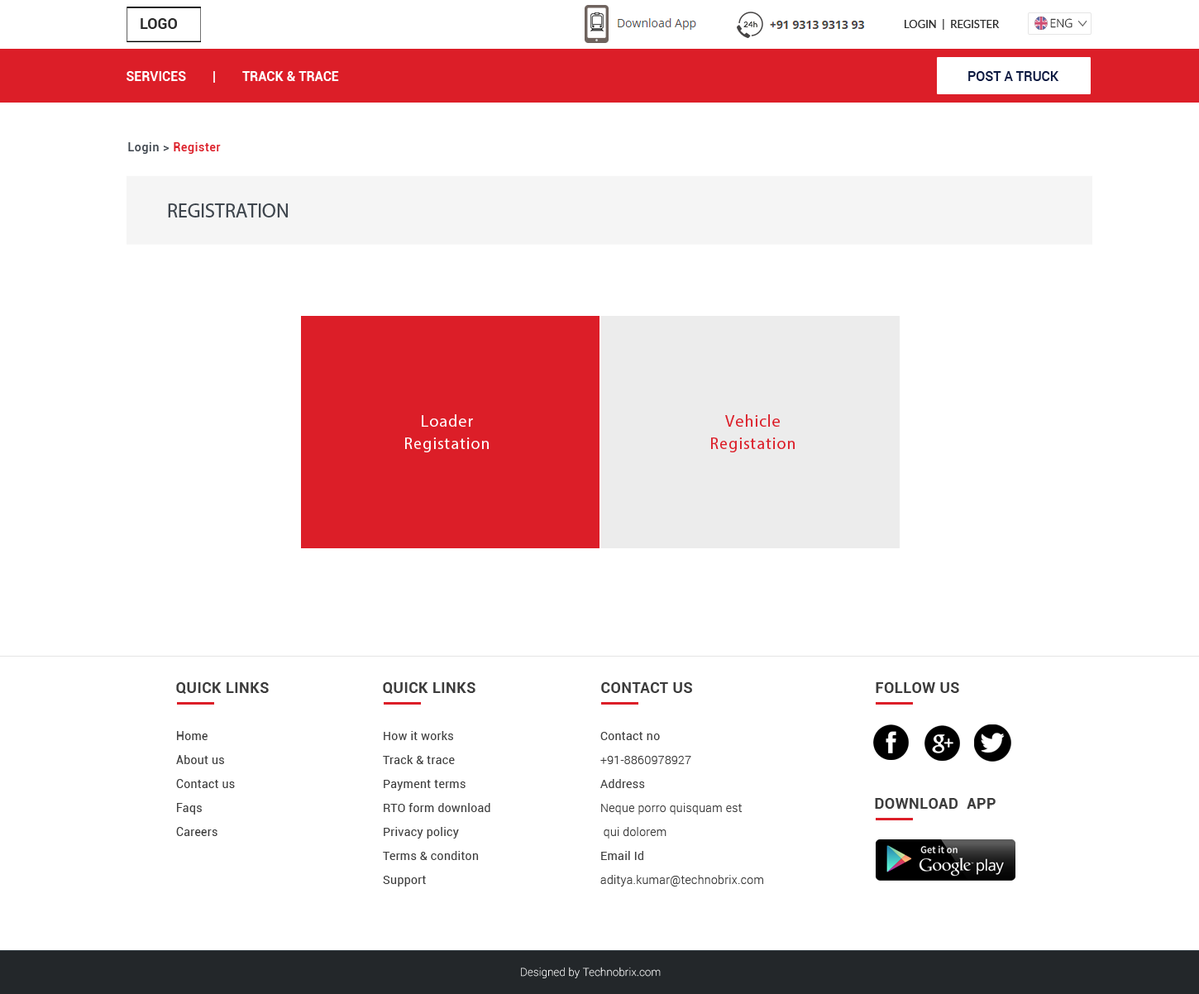
<style>
.page{position:relative;width:1199px;height:994px;background:#ffffff}
.page>*{position:absolute;margin:0}
.t1{font:14.9px "Roboto-Bold";color:#2c2c2c}
.t2{font:10.8px "Lato-Regular";color:#2c2c2c;text-transform:uppercase}
.t3{font:11.6px "OpenSans-Light";color:#2c2c2c}
.t4{font:13.2px "Roboto-Bold";color:#ffffff;text-transform:uppercase}
.t5{font:13.2px "Roboto-Medium";color:#0d1a41}
.t6{font:11.6px "Roboto-Medium";letter-spacing:0.05em;color:#dc1e28}
.t7{font:11.6px "Roboto-Medium";letter-spacing:0.05em;color:#3f464e}
.t8{font:19.9px "MyriadPro-Regular";color:#3f464e;text-transform:uppercase}
.t9{font:16.5px/22.2px "MyriadPro-Regular";letter-spacing:0.05em;color:#ffffff}
.t10{font:16.5px/22.2px "MyriadPro-Regular";letter-spacing:0.05em;color:#dc1e28}
.t11{font:14.9px "Roboto-Bold";letter-spacing:0.025em;color:#3c3c3c}
.t12{font:11.6px/24px "Roboto-Regular";letter-spacing:0.025em;color:#3c3c3c}
.t13{font:11.6px/24px "Roboto-Light";letter-spacing:0.025em;color:#3c3c3c}
.t14{font:10.8px "Roboto-Thin";letter-spacing:0.025em;color:#ffffff}
</style>
<div class="page">
<p class="t1" style="left:141px;top:18px;width:36px;height:11px">LOGO</p>
<p class="t2" style="left:905px;top:19px;width:95px;height:11px">Login  |  Register</p>
<p class="t3" style="left:1050px;top:18px;width:23px;height:10px">ENG</p>
<p class="t4" style="left:127px;top:71px;width:212px;height:12px">Services        |        Track &amp; TraCe</p>
<p class="t5" style="left:969px;top:71px;width:91px;height:10px">POST A TRUCK</p>
<p class="t6" style="left:128px;top:142px;width:93px;height:12px"><span class="t7">Login &gt; </span>Register</p>
<p class="t8" style="left:168px;top:203px;width:120px;height:15px">Registration</p>
<p class="t9" style="left:405px;top:414px;width:84px;height:38px;text-align:center">Loader<br>Registation</p>
<p class="t10" style="left:711px;top:414px;width:84px;height:38px;text-align:center">Vehicle<br>Registation</p>
<p class="t11" style="left:176px;top:682px;width:93px;height:12px">QUICK LINKS</p>
<p class="t11" style="left:383px;top:682px;width:93px;height:12px">QUICK LINKS</p>
<p class="t11" style="left:601px;top:682px;width:91px;height:11px">CONTACT US</p>
<p class="t11" style="left:876px;top:682px;width:83px;height:11px">FOLLOW US</p>
<p class="t12" style="left:176px;top:731px;width:59px;height:105px">Home<br>About us <br>Contact us<br>Faqs<br>Careers</p>
<p class="t12" style="left:383px;top:731px;width:107px;height:156px">How it works<br>Track &amp; trace<br>Payment terms<br>RTO form download<br>Privacy policy <br>Terms &amp; conditon<br>Support</p>
<p class="t13" style="left:601px;top:732px;width:162px;height:155px"><span class="t12">Contact no<br></span>+91-8860978927<br><span class="t12">Address<br></span>Neque porro quisquam est<br> qui dolorem<br><span class="t12">Email Id<br></span>aditya.kumar@technobrix.com</p>
<p class="t11" style="left:875px;top:798px;width:121px;height:11px">DOWNLOAD  APP</p>
<p class="t14" style="left:521px;top:967px;width:140px;height:12px">Designed by Technobrix.com</p>
</div>
